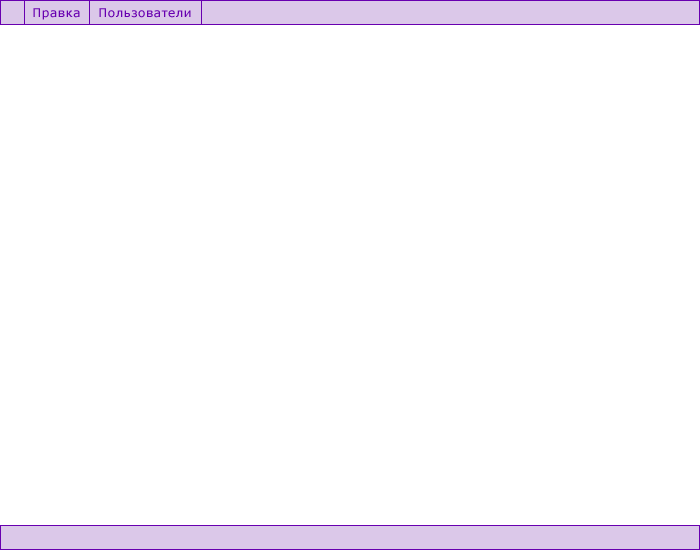
<style>
.page{position:relative;width:700px;height:550px;background:#ffffff}
.page>*{position:absolute;margin:0}
.t1{font:12px "Verdana";letter-spacing:0.05em;color:#6800b0}
</style>
<div class="page">
<p class="t1" style="left:33px;top:8px;width:47px;height:12px">Правка</p>
<p class="t1" style="left:99px;top:8px;width:92px;height:10px">Пользователи</p>
</div>
